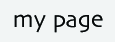
<style>
.page{position:relative;width:115px;height:42px;background:#f2f5f5}
.page>*{position:absolute;margin:0}
.t1{font:24px "Skia-Regular";color:#070809}
</style>
<div class="page">
<p class="t1" style="left:14px;top:14px;width:89px;height:19px">my page</p>
</div>
